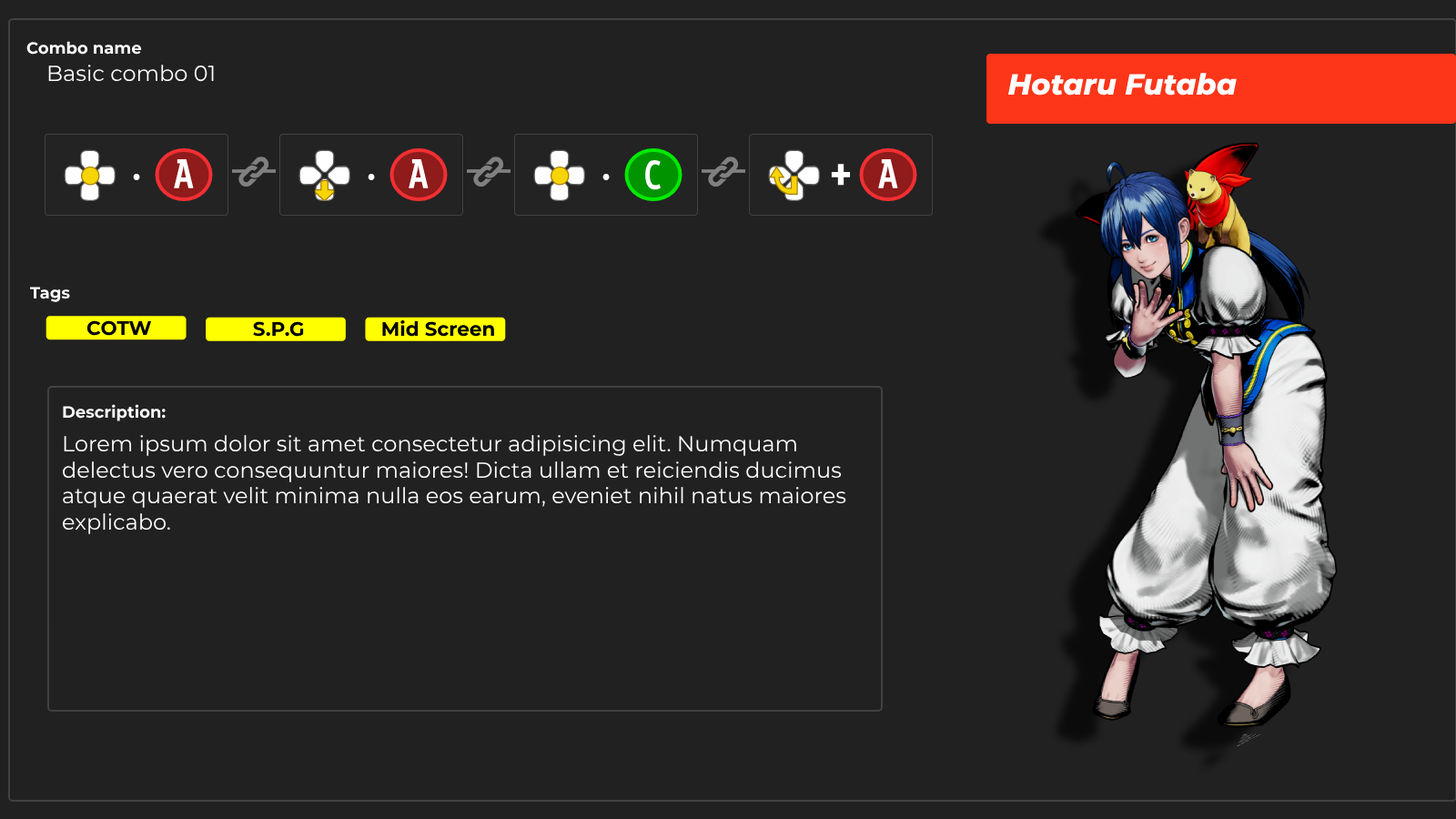
<style>
.page{position:relative;width:1456px;height:819px;background:#212121}
.page>*{position:absolute;margin:0}
.t1{font:16.4px "Montserrat-Bold";color:#ffffff}
.t2{font:21.8px "Montserrat-Regular";color:#ffffff}
.t3{font:29.1px "Montserrat-ExtraBoldItalic";color:#ffffff}
.t4{font:19.6px "Montserrat-Bold";color:#000000}
</style>
<div class="page">
<p class="t1" style="left:26px;top:41px;width:116px;height:14px">Combo name</p>
<p class="t2" style="left:48px;top:65px;width:166px;height:17px">Basic combo 01</p>
<p class="t3" style="left:1007px;top:73px;width:230px;height:23px">Hotaru Futaba</p>
<p class="t1" style="left:30px;top:287px;width:40px;height:15px">Tags</p>
<p class="t4" style="left:86px;top:320px;width:66px;height:16px">COTW</p>
<p class="t4" style="left:253px;top:321px;width:51px;height:16px">S.P.G</p>
<p class="t4" style="left:382px;top:320px;width:112px;height:17px">Mid Screen</p>
<p class="t1" style="left:63px;top:404px;width:103px;height:17px">Description:</p>
<p class="t2" style="left:63px;top:435px;width:783px;height:99px">Lorem ipsum dolor sit amet consectetur adipisicing elit. Numquam delectus vero consequuntur maiores! Dicta ullam et reiciendis ducimus atque quaerat velit minima nulla eos earum, eveniet nihil natus maiores explicabo.</p>
</div>
